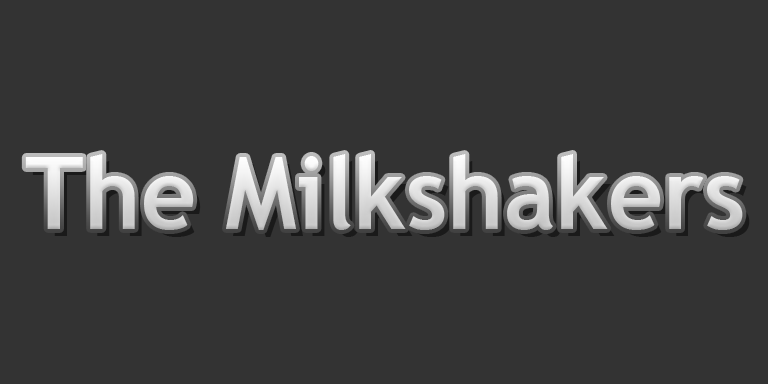
<style>
.page{position:relative;width:768px;height:384px;background:#333333}
.page>*{position:absolute;margin:0}
.t1{font:100px "TrebuchetMS-Bold";color:#dbdbdb;scale:0.96 1}
</style>
<div class="page">
<p class="t1" style="left:25px;top:154px;width:718px;height:76px">The Milkshakers</p>
</div>
